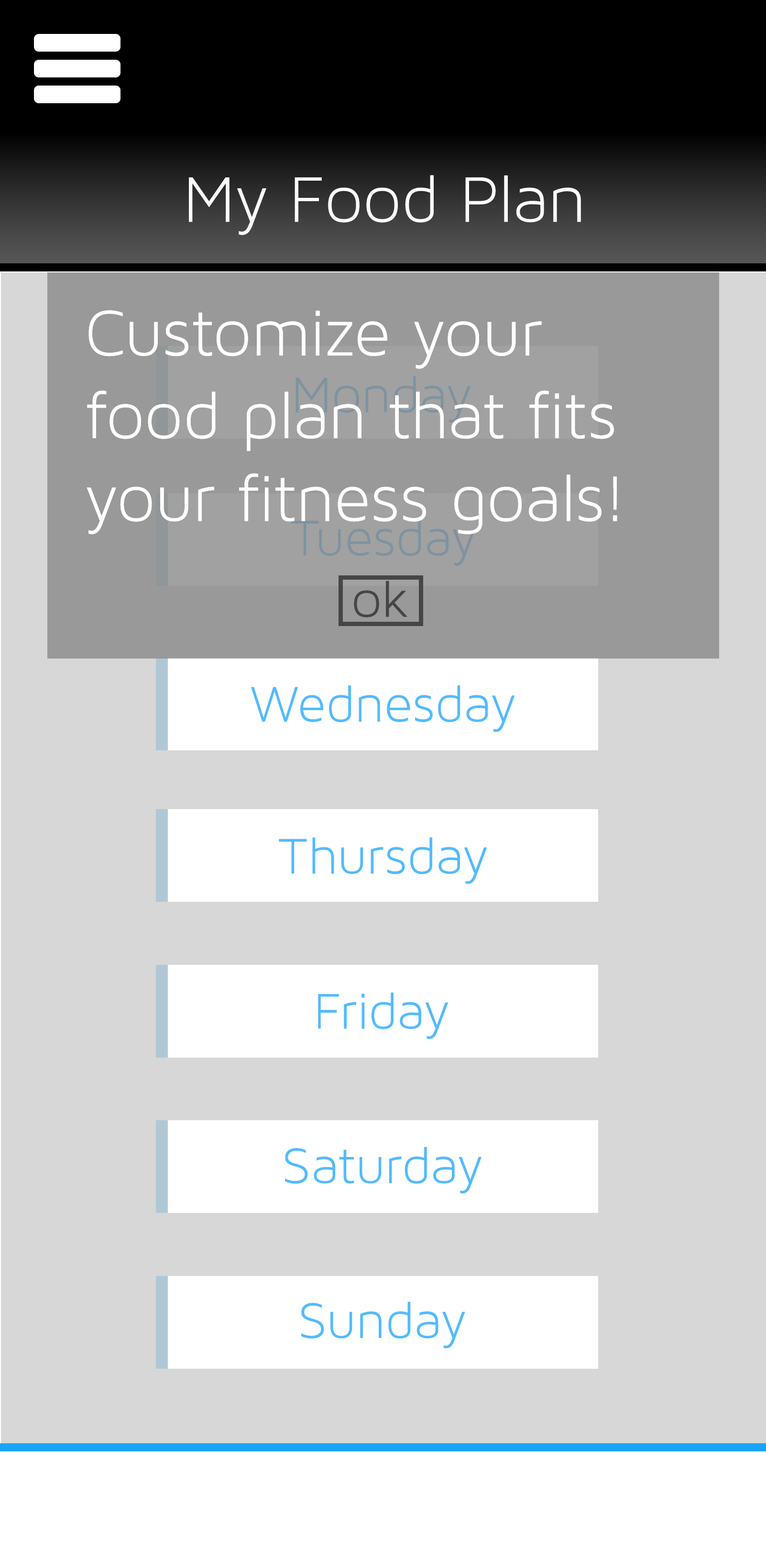
<style>
.page{position:relative;width:766px;height:1557px;background:#d7d7d7}
.page>*{position:absolute;margin:0}
.t1{font:68.9px "MavenProLight300-Regular";color:#fefbfb}
.t2{font:68.9px "MavenProLight300-Regular";color:#fefefd}
.t3{font:53.6px "MavenProLight300-Regular";color:#7e93a0}
.t4{font:53.6px "MavenProLight300-Regular";color:#52bbfd}
</style>
<div class="page">
<p class="t1" style="left:189px;top:175px;width:392px;height:60px">My Food Plan</p>
<p class="t2" style="left:87px;top:310px;width:530px;height:224px">Customize your food plan that fits your fitness goals!</p>
<p class="t2" style="left:87px;top:310px;width:530px;height:224px">Customize your food plan that fits your fitness goals!</p>
<p class="t3" style="left:295px;top:376px;width:175px;height:47px">Monday</p>
<p class="t3" style="left:291px;top:519px;width:185px;height:47px">Tuesday</p>
<p class="t4" style="left:251px;top:685px;width:264px;height:47px">Wednesday</p>
<p class="t4" style="left:279px;top:837px;width:208px;height:47px">Thursday</p>
<p class="t4" style="left:318px;top:992px;width:130px;height:47px">Friday</p>
<p class="t4" style="left:285px;top:1147px;width:196px;height:47px">Saturday</p>
<p class="t4" style="left:301px;top:1302px;width:164px;height:47px">Sunday</p>
</div>
